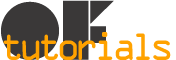
<style>
.page{position:relative;width:176px;height:60px;background:#ffffff}
.page>*{position:absolute;margin:0}
.t1{font:36px "OCRAStd";letter-spacing:-0.2em;color:#ffa200}
</style>
<div class="page">
<p class="t1" style="left:3px;top:32px;width:168px;height:28px">tutorials</p>
</div>
